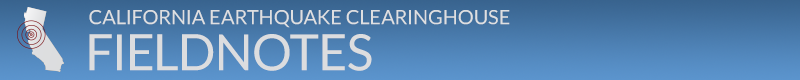
<style>
.page{position:relative;width:800px;height:80px}
.page>*{position:absolute;margin:0}
.t1{font:20px "Lato-Regular";color:#dedfe1}
.t2{font:50px "Lato-Regular";color:#dcdddf}
</style>
<div class="page">
<p class="t1" style="left:89px;top:10px;width:421px;height:18px">CALIFORNIA EARTHQUAKE CLEARINGHOUSE</p>
<p class="t2" style="left:89px;top:34px;width:283px;height:37px">FIELDNOTES</p>
</div>
